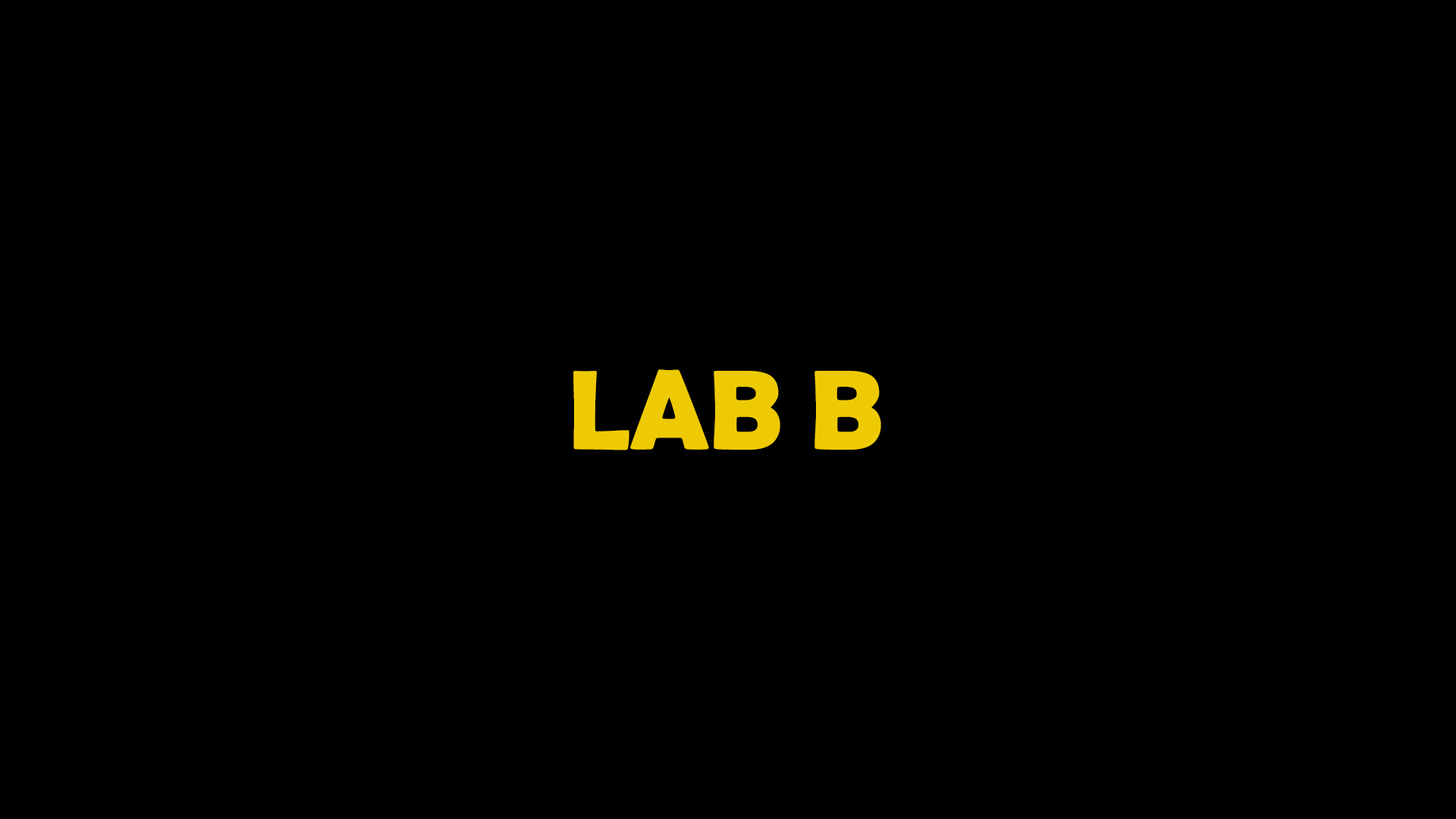
<style>
.page{position:relative;width:1456px;height:819px;background:#000000}
.page>*{position:absolute;margin:0}
.t1{font:113.7px "BerlinSansFBDemi-Bold";color:#eeca04}
</style>
<div class="page">
<p class="t1" style="left:573px;top:369px;width:308px;height:81px">LAB B</p>
</div>
